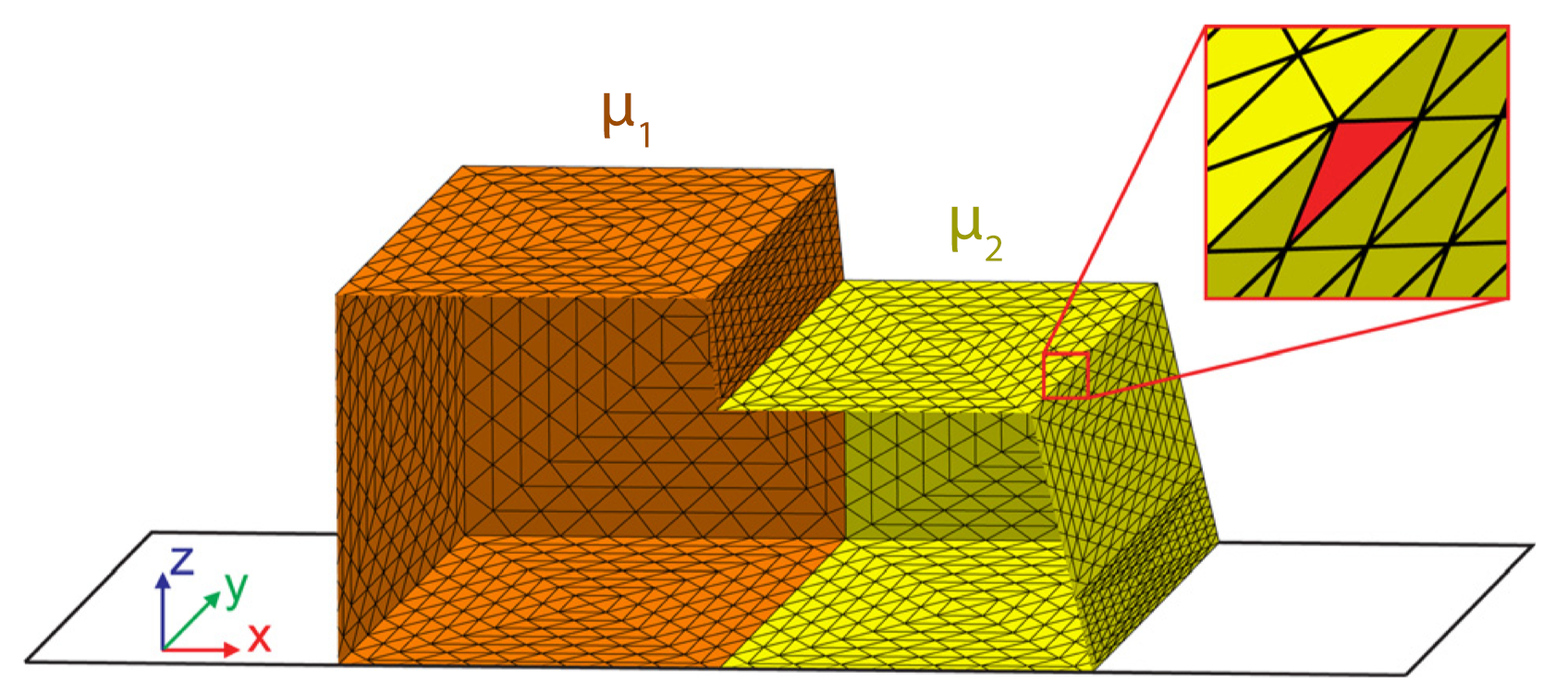
<style>
.page{position:relative;width:1568px;height:693px;background:#ffffff}
.page>*{position:absolute;margin:0}
.t1{font:66.6px "MyriadPro-Regular";color:#9c4c01}
.t2{font:66.6px "MyriadPro-Regular";color:#9b9b03}
</style>
<div class="page">
<p class="t1" style="left:604px;top:92px;width:45px;height:56px">μ1</p>
<p class="t2" style="left:951px;top:206px;width:51px;height:56px">μ2</p>
</div>
